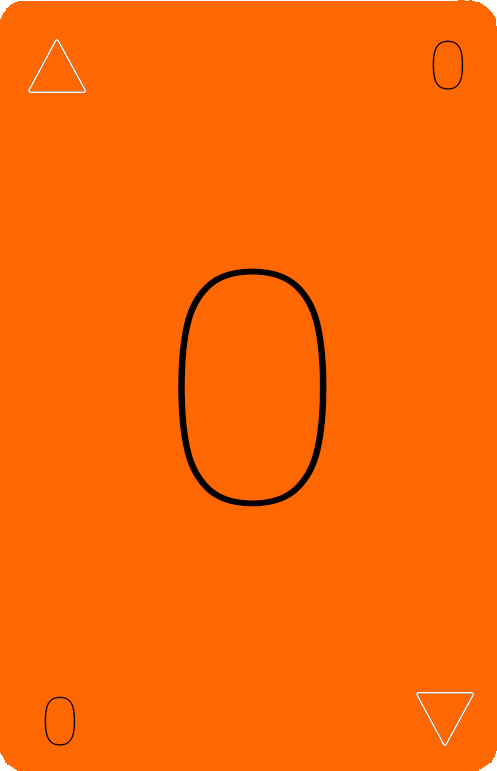
<style>
.page{position:relative;width:497px;height:771px;background:#ff6800}
.page>*{position:absolute;margin:0}
.t1{font:67.8px "Poppins-Thin";color:#000000}
.t2{font:331px "Poppins-Thin";color:#000000}
</style>
<div class="page">
<p class="t1" style="left:432px;top:40px;width:32px;height:50px">0</p>
<p class="t2" style="left:178px;top:268px;width:149px;height:239px">0</p>
<p class="t1" style="left:44px;top:696px;width:32px;height:50px">0</p>
</div>
